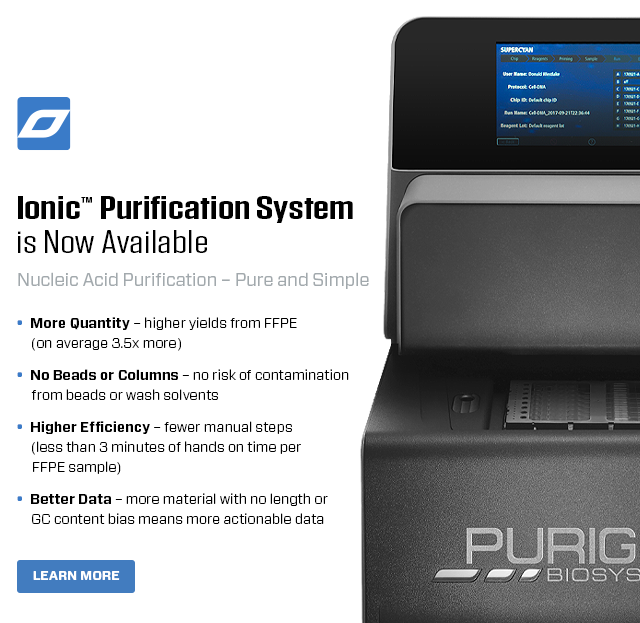
<style>
.page{position:relative;width:640px;height:623px;background:#ffffff}
.page>*{position:absolute;margin:0}
.t1{font:33px/34px "Tungsten-Semibold";color:#000000;scale:1.43 1}
.t2{font:32px/34px "Tungsten-Book";color:#000000;scale:1.43 1}
.t3{font:18px "Forza-Book";letter-spacing:-0.01em;color:#a2a9ad}
.t4{font:14px/20px "Forza-Light";color:#000000}
.t5{font:14px/20px "Forza-Bold";color:#3a7bc8}
.t6{font:14px/20px "Forza-Bold";color:#000000}
.t7{font:13px "Forza-Bold";color:#ffffff;text-transform:uppercase}
</style>
<div class="page">
<p class="t1" style="left:18px;top:196px;width:335px;height:57px">Ionic™ Purification System<br><span class="t2">is Now Available</span></p>
<p class="t3" style="left:18px;top:272px;width:351px;height:17px">Nucleic Acid Purification – Pure and Simple</p>
<p class="t4" style="left:17px;top:317px;width:332px;height:207px"><span class="t5">•  </span><span class="t6">More Quantity</span> – higher yields from FFPE <br>     (on average 3.5x more)<br><span class="t5">•  </span><span class="t6">No Beads or Columns</span> – no risk of contamination <br>     from beads or wash solvents<br><span class="t5">•  </span><span class="t6">Higher Efficiency</span> – fewer manual steps <br>     (less than 3 minutes of hands on time per <br>     FFPE sample)<br><span class="t5">•  </span><span class="t6">Better Data</span> – more material with no length or <br>     GC content bias means more actionable data</p>
<p class="t7" style="left:33px;top:571px;width:87px;height:9px">Learn More</p>
</div>
